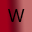
<style>
.page{position:relative;width:32px;height:32px}
.page>*{position:absolute;margin:0}
.t1{font:18px "SegoeUI";color:#000000}
</style>
<div class="page">
<p class="t1" style="left:8px;top:9px;width:17px;height:13px">W</p>
</div>
